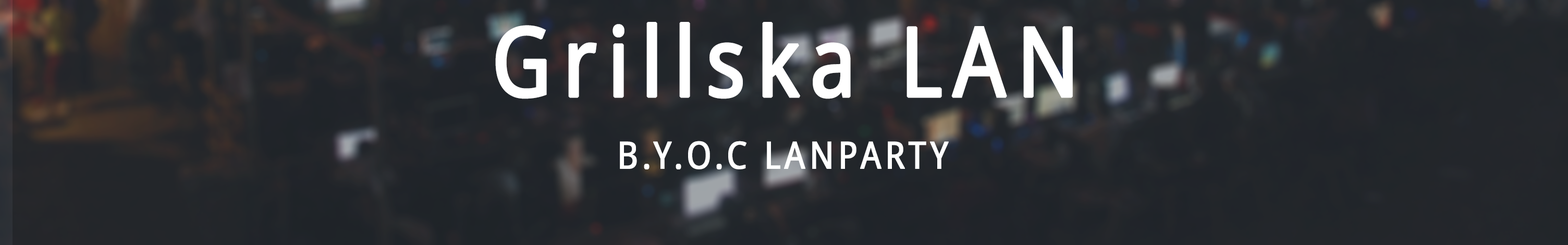
<style>
.page{position:relative;width:1568px;height:245px}
.page>*{position:absolute;margin:0}
.t1{font:96.4px "DroidSans";letter-spacing:0.095em;color:#ffffff;font-weight:bold;scale:0.9 1}
.t2{font:37.5px "DroidSans";letter-spacing:0.095em;color:#ffffff;font-weight:bold;scale:0.9 1}
</style>
<div class="page">
<p class="t1" style="left:495px;top:22px;width:578px;height:77px">Grillska LAN</p>
<p class="t2" style="left:620px;top:141px;width:329px;height:28px">B.Y.O.C LANPARTY</p>
</div>
